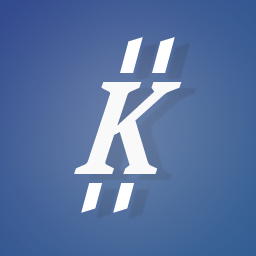
<style>
.page{position:relative;width:256px;height:256px}
.page>*{position:absolute;margin:0}
.t1{font:144px "SitkaText-BoldItalic";color:#ffffff;font-style:italic;scale:0.83 1}
</style>
<div class="page">
<p class="t1" style="left:74px;top:82px;width:108px;height:92px">K</p>
</div>
